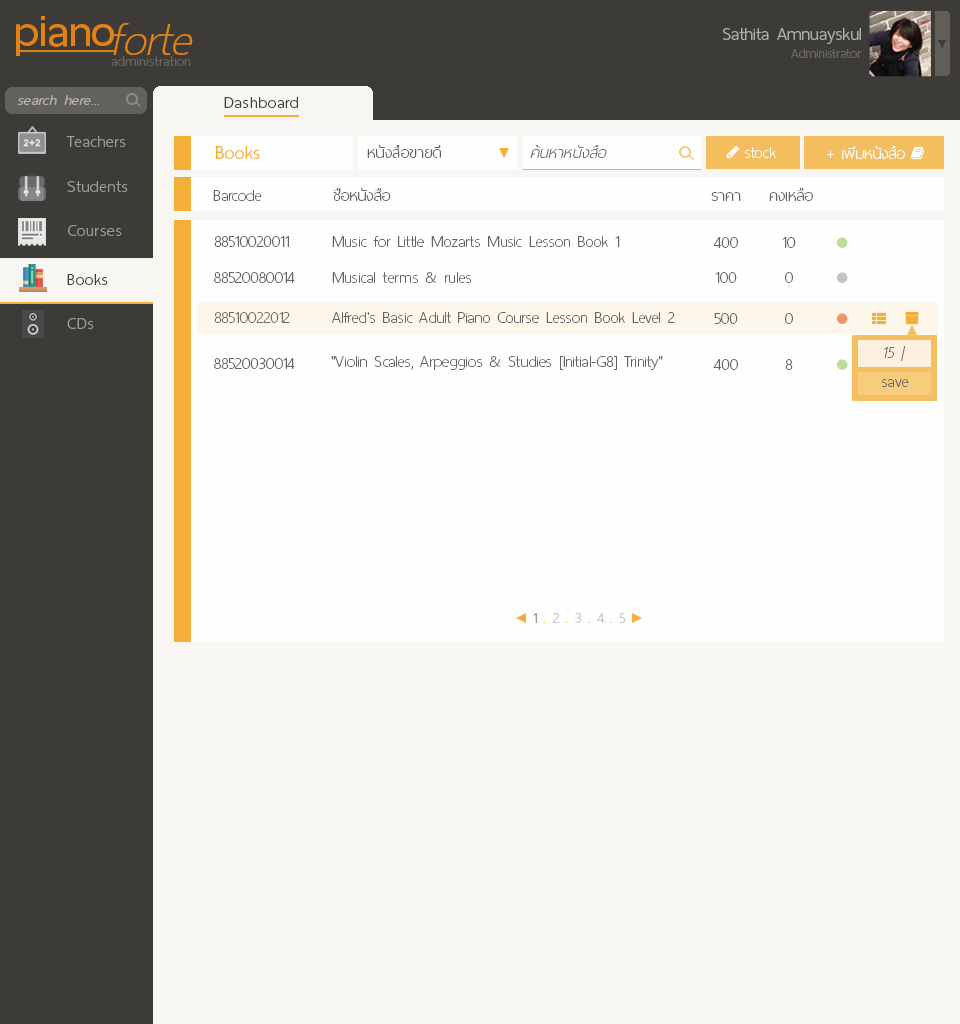
<style>
.page{position:relative;width:960px;height:1024px;background:#f8f6f3}
.page>*{position:absolute;margin:0}
.t1{font:60px "ThaiSansNeue-SemiBold";letter-spacing:-0.005em;color:#e28212}
.t2{font:62px "ThaiSansNeue-ExtraLightItalic";letter-spacing:-0.005em;color:#e28212}
.t3{font:24px "ThaiSansNeue-Light";letter-spacing:-0.005em;color:#afaeac}
.t4{font:18px "ThaiSansNeue-Light";letter-spacing:-0.005em;color:#6a665f}
.t5{font:18.5px "ThaiSansNeue-ExtraLight";letter-spacing:0.025em;color:#6a665f}
.t6{font:20px "ThaiSansNeue-LightItalic";letter-spacing:0.025em;color:#b4b1ae}
.t7{font:22px "ThaiSansNeue-Light";letter-spacing:0.025em;color:#3d3b37}
.t8{font:22px "ThaiSansNeue-Light";letter-spacing:0.025em;color:#9b9a99}
.t9{font:26px "ThaiSansNeue-Light";letter-spacing:-0.005em;color:#f3af37}
.t10{font:22px "ThaiSansNeue-UltraLight";letter-spacing:0.01em;color:#636363}
.t11{font:22px "ThaiSansNeue-UltraLightItalic";letter-spacing:0.01em;color:#636363}
.t12{font:22px "ThaiSansNeue-UltraLight";color:#fefefe}
.t13{font:22px "ThaiSansNeue-UltraLight";color:#636363}
.t14{font:20px "ThaiSansNeue-Light";color:#989898}
.t15{font:20px "ThaiSansNeue-Light";color:#f3af37}
.t16{font:20px "ThaiSansNeue-Light";color:#cccbc9}
</style>
<div class="page">
<p class="t1" style="left:16px;top:16px;width:98px;height:40px">piano</p>
<p class="t2" style="left:113px;top:23px;width:80px;height:32px">forte</p>
<p class="t3" style="left:723px;top:28px;width:138px;height:16px">Sathita Amnuayskul</p>
<p class="t4" style="left:791px;top:49px;width:71px;height:9px">Administrator</p>
<p class="t5" style="left:111px;top:56px;width:80px;height:10px">administration</p>
<p class="t6" style="left:17px;top:95px;width:83px;height:10px">search here...</p>
<p class="t7" style="left:224px;top:97px;width:74px;height:11px">Dashboard</p>
<p class="t8" style="left:66px;top:136px;width:60px;height:11px">Teachers</p>
<p class="t9" style="left:216px;top:146px;width:44px;height:13px">Books</p>
<p class="t10" style="left:367px;top:145px;width:74px;height:13px">หนังสือขายดี</p>
<p class="t11" style="left:530px;top:145px;width:77px;height:13px">ค้นหาหนังสือ</p>
<p class="t12" style="left:745px;top:147px;width:31px;height:11px">stock</p>
<p class="t12" style="left:827px;top:146px;width:78px;height:13px">+ เพิ่มหนังสือ</p>
<p class="t8" style="left:67px;top:181px;width:61px;height:11px">Students</p>
<p class="t13" style="left:213px;top:190px;width:49px;height:11px">Barcode</p>
<p class="t13" style="left:333px;top:188px;width:58px;height:13px">ชื่่อหนังสือ</p>
<p class="t13" style="left:711px;top:192px;width:30px;height:9px">ราคา</p>
<p class="t13" style="left:769px;top:188px;width:44px;height:13px">คงเหลือ</p>
<p class="t8" style="left:68px;top:225px;width:54px;height:11px">Courses</p>
<p class="t13" style="left:214px;top:236px;width:75px;height:11px">88510020011</p>
<p class="t13" style="left:332px;top:236px;width:288px;height:11px">Music for Little Mozarts Music Lesson Book 1</p>
<p class="t13" style="left:713px;top:237px;width:25px;height:11px">400</p>
<p class="t13" style="left:782px;top:237px;width:14px;height:11px">10</p>
<p class="t7" style="left:67px;top:274px;width:41px;height:11px">Books</p>
<p class="t13" style="left:214px;top:272px;width:81px;height:11px">88520080014</p>
<p class="t13" style="left:332px;top:272px;width:139px;height:11px">Musical terms &amp; rules</p>
<p class="t13" style="left:715px;top:272px;width:22px;height:11px">100</p>
<p class="t13" style="left:785px;top:272px;width:8px;height:11px">0</p>
<p class="t8" style="left:67px;top:318px;width:27px;height:11px">CDs</p>
<p class="t13" style="left:214px;top:312px;width:76px;height:11px">88510022012</p>
<p class="t13" style="left:332px;top:312px;width:343px;height:11px">Alfred's Basic Adult Piano Course Lesson Book Level 2</p>
<p class="t13" style="left:714px;top:313px;width:24px;height:11px">500</p>
<p class="t13" style="left:785px;top:313px;width:8px;height:11px">0</p>
<p class="t11" style="left:884px;top:346px;width:22px;height:15px">15 |</p>
<p class="t13" style="left:214px;top:358px;width:81px;height:11px">88520030014</p>
<p class="t13" style="left:331px;top:356px;width:332px;height:14px">"Violin Scales, Arpeggios &amp; Studies [Initial-G8] Trinity"</p>
<p class="t13" style="left:713px;top:359px;width:25px;height:11px">400</p>
<p class="t13" style="left:785px;top:359px;width:8px;height:11px">8</p>
<p class="t10" style="left:882px;top:379px;width:27px;height:8px">save</p>
<p class="t14" style="left:533px;top:613px;width:93px;height:10px">1 <span class="t15">.</span><span class="t16"> 2 </span><span class="t15">.</span><span class="t16"> 3 </span><span class="t15">.</span><span class="t16"> 4 </span><span class="t15">. </span><span class="t16">5</span></p>
</div>
